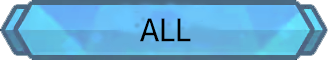
<style>
.page{position:relative;width:329px;height:60px}
.page>*{position:absolute;margin:0}
.t1{font:30px "KoreanGD14-R";color:#000000}
</style>
<div class="page">
<p class="t1" style="left:140px;top:18px;width:51px;height:24px">ALL</p>
</div>
